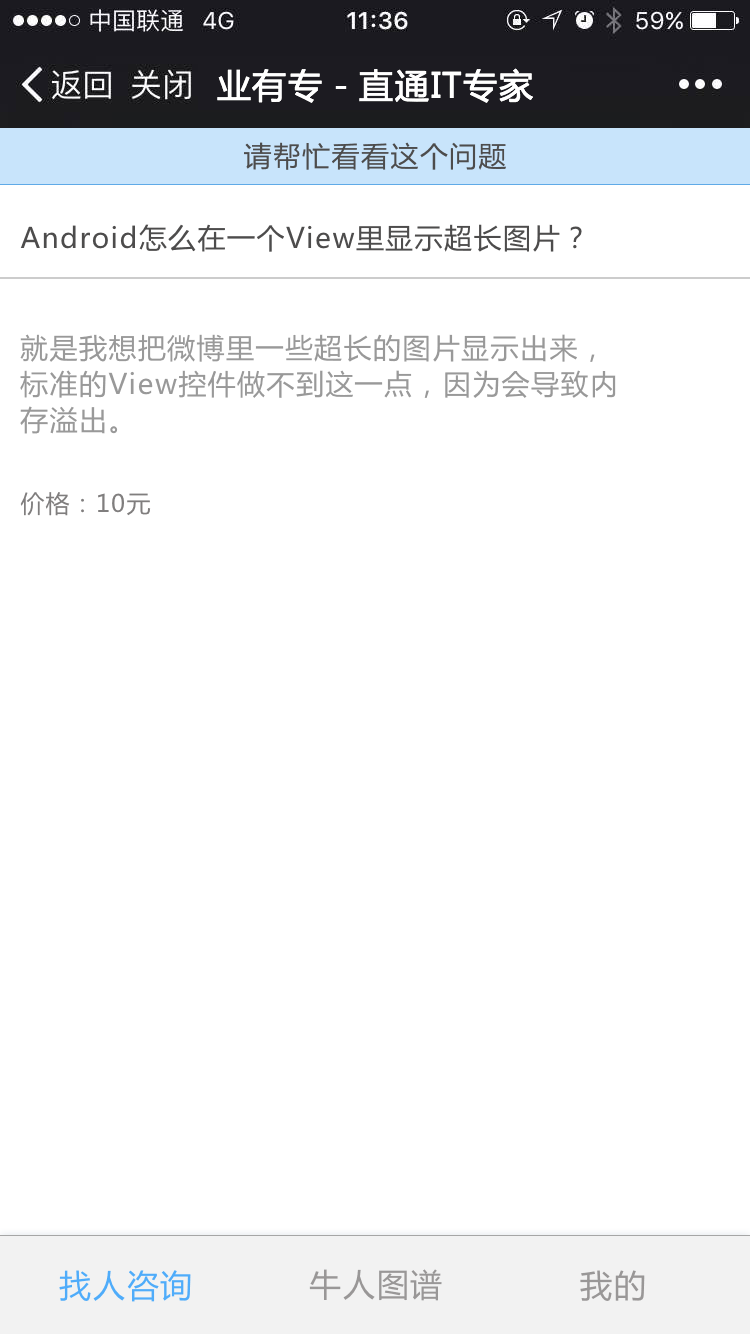
<style>
.page{position:relative;width:750px;height:1334px;background:#ffffff}
.page>*{position:absolute;margin:0}
.t1{font:34px "MicrosoftYaHei";letter-spacing:0.05em;color:#ffffff;text-transform:uppercase}
.t2{font:28px "MicrosoftYaHei";letter-spacing:0.05em;color:#4d4c4c}
.t3{font:28px/36px "MicrosoftYaHei";letter-spacing:0.05em;color:#999999}
.t4{font:24px "MicrosoftYaHei";letter-spacing:0.05em;color:#807e7e}
.t5{font:32px "MicrosoftYaHei";letter-spacing:0.05em;color:#4facfa;text-transform:uppercase}
.t6{font:32px "MicrosoftYaHei";letter-spacing:0.05em;color:#999797;text-transform:uppercase}
</style>
<div class="page">
<p class="t1" style="left:217px;top:68px;width:316px;height:35px">业有专－直通IT专家</p>
<p class="t2" style="left:244px;top:142px;width:262px;height:28px">请帮忙看看这个问题</p>
<p class="t2" style="left:20px;top:224px;width:562px;height:28px">Android怎么在一个View里显示超长图片？</p>
<p class="t3" style="left:20px;top:334px;width:596px;height:100px">就是我想把微博里一些超长的图片显示出来，标准的View控件做不到这一点，因为会导致内<br>存溢出。</p>
<p class="t4" style="left:20px;top:492px;width:131px;height:24px">价格：10元</p>
<p class="t5" style="left:59px;top:1270px;width:132px;height:32px">找人咨询</p>
<p class="t6" style="left:309px;top:1269px;width:133px;height:32px">牛人图谱</p>
<p class="t6" style="left:580px;top:1270px;width:65px;height:31px">我的</p>
</div>
